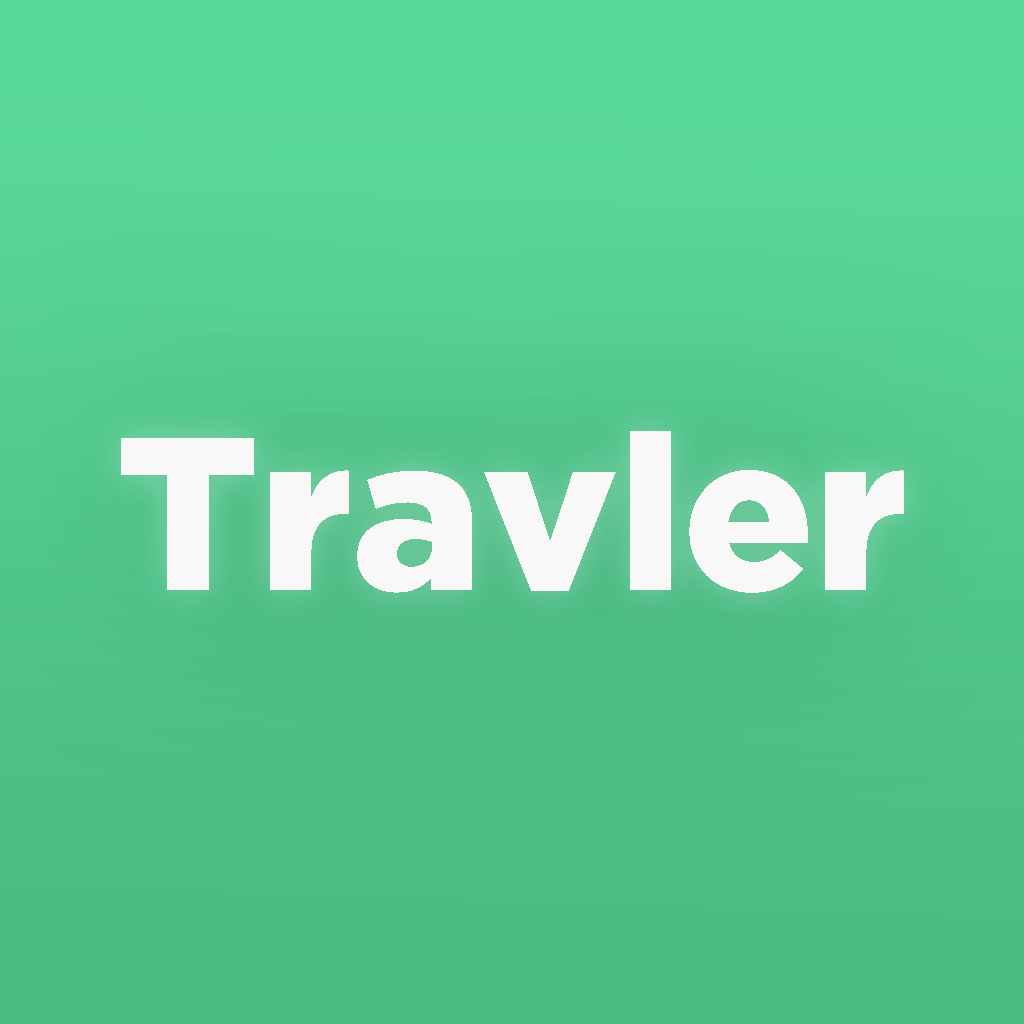
<style>
.page{position:relative;width:1024px;height:1024px}
.page>*{position:absolute;margin:0}
.t1{font:217.3px "Gotham-Black";color:#f8f8f8}
</style>
<div class="page">
<p class="t1" style="left:121px;top:431px;width:783px;height:162px">Travler</p>
</div>
